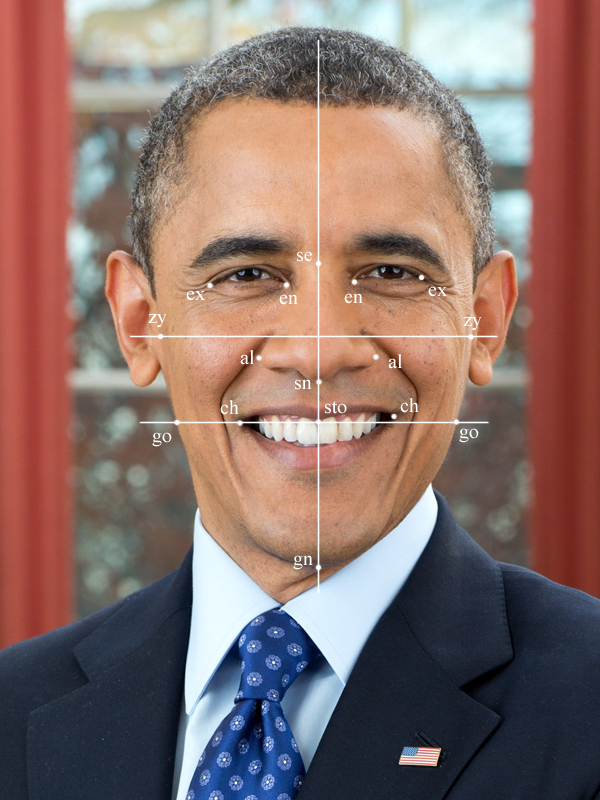
<style>
.page{position:relative;width:600px;height:800px}
.page>*{position:absolute;margin:0}
.t1{font:20px "TimesNewRomanPSMT";color:#ffffff}
</style>
<div class="page">
<p class="t1" style="left:297px;top:251px;width:15px;height:11px">se</p>
<p class="t1" style="left:186px;top:290px;width:19px;height:11px">ex</p>
<p class="t1" style="left:279px;top:294px;width:19px;height:11px">en</p>
<p class="t1" style="left:344px;top:293px;width:19px;height:11px">en</p>
<p class="t1" style="left:428px;top:286px;width:19px;height:11px">ex</p>
<p class="t1" style="left:148px;top:314px;width:19px;height:14px">zy</p>
<p class="t1" style="left:463px;top:317px;width:19px;height:14px">zy</p>
<p class="t1" style="left:240px;top:350px;width:14px;height:15px">al</p>
<p class="t1" style="left:388px;top:354px;width:14px;height:15px">al</p>
<p class="t1" style="left:295px;top:379px;width:17px;height:11px">sn</p>
<p class="t1" style="left:220px;top:400px;width:19px;height:15px">ch</p>
<p class="t1" style="left:325px;top:401px;width:22px;height:13px">sto</p>
<p class="t1" style="left:400px;top:398px;width:19px;height:15px">ch</p>
<p class="t1" style="left:152px;top:432px;width:20px;height:15px">go</p>
<p class="t1" style="left:459px;top:428px;width:20px;height:15px">go</p>
<p class="t1" style="left:293px;top:555px;width:20px;height:15px">gn</p>
</div>
